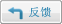
<style>
.page{position:relative;width:62px;height:24px;background:#f4f4f4}
.page>*{position:absolute;margin:0}
.t1{font:11px "NSimSun";letter-spacing:0.05em;color:#3e8eb5}
</style>
<div class="page">
<p class="t1" style="left:29px;top:7px;width:22px;height:11px">反馈</p>
<p class="t1" style="left:29px;top:7px;width:22px;height:11px">反馈</p>
</div>
